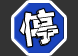
<style>
.page{position:relative;width:78px;height:56px;background:#333333}
.page>*{position:absolute;margin:0}
.t1{font:36px "CloudHeiChaoCuGBK";color:#ffffff}
</style>
<div class="page">
<p class="t1" style="left:21px;top:10px;width:36px;height:37px;rotate:-8deg">停</p>
</div>
